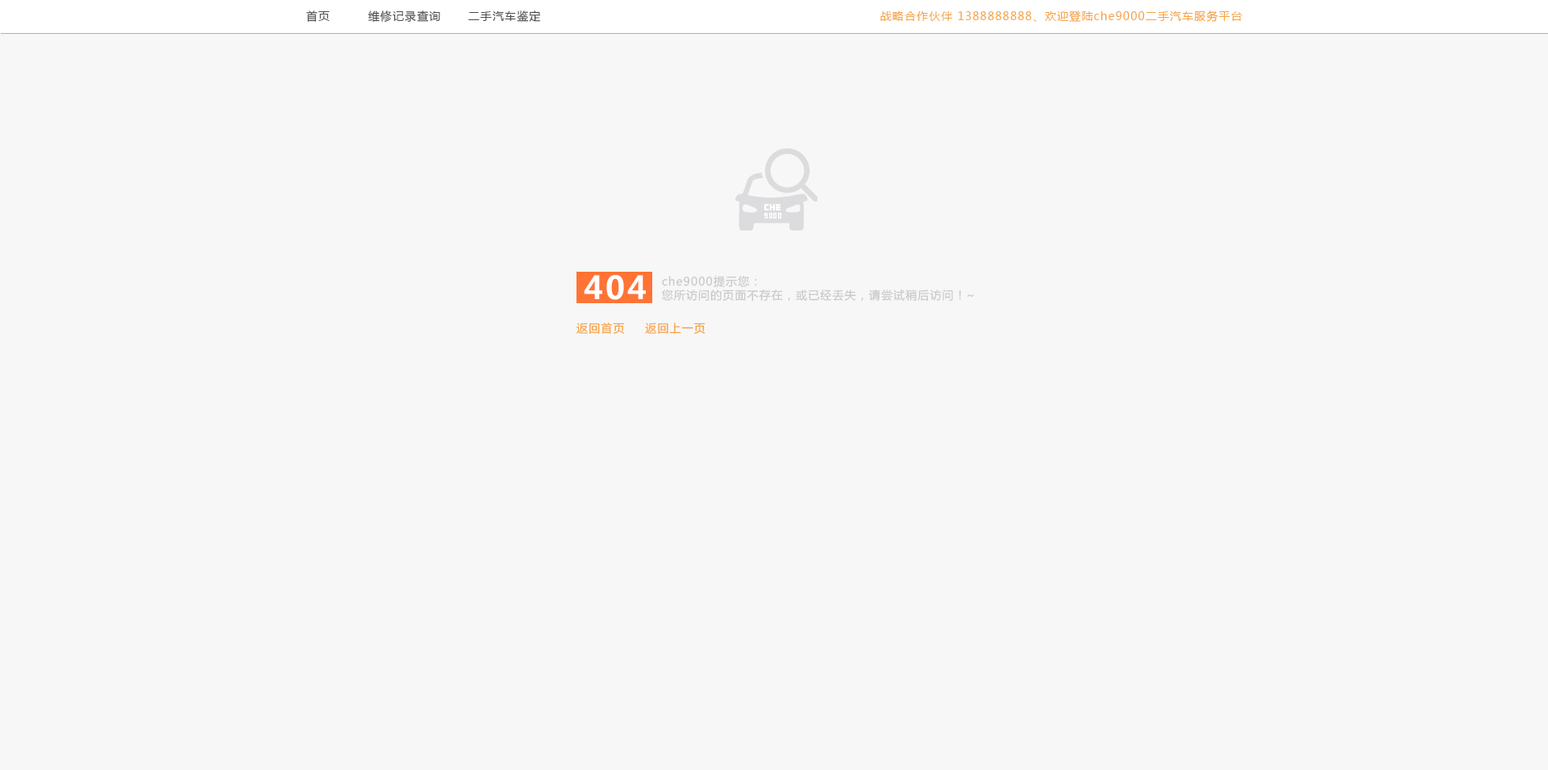
<style>
.page{position:relative;width:1548px;height:770px;background:#f7f7f7}
.page>*{position:absolute;margin:0}
.t1{font:11.3px "MicrosoftYaHei";letter-spacing:0.08em;color:#494949}
.t2{font:11.3px "MicrosoftYaHei";letter-spacing:0.08em;color:#f7a13c}
.t3{font:31.5px "MicrosoftYaHei-Bold";letter-spacing:0.08em;color:#ffffff}
.t4{font:11.3px "MicrosoftYaHei";letter-spacing:0.08em;color:#c8c8c8}
</style>
<div class="page">
<p class="t1" style="left:306px;top:10px;width:24px;height:12px">首页</p>
<p class="t1" style="left:368px;top:10px;width:72px;height:13px">维修记录查询</p>
<p class="t1" style="left:469px;top:10px;width:71px;height:12px">二手汽车鉴定</p>
<p class="t2" style="left:881px;top:10px;width:362px;height:12px">战略合作伙伴 1388888888、欢迎登陆che9000二手汽车服务平台</p>
<p class="t3" style="left:584px;top:275px;width:62px;height:25px">404</p>
<p class="t4" style="left:662px;top:276px;width:95px;height:11px">che9000提示您：</p>
<p class="t4" style="left:662px;top:290px;width:312px;height:12px">您所访问的页面不存在，或已经丢失，请尝试稍后访问！~</p>
<p class="t2" style="left:577px;top:323px;width:48px;height:11px">返回首页</p>
<p class="t2" style="left:645px;top:323px;width:61px;height:11px">返回上一页</p>
</div>
